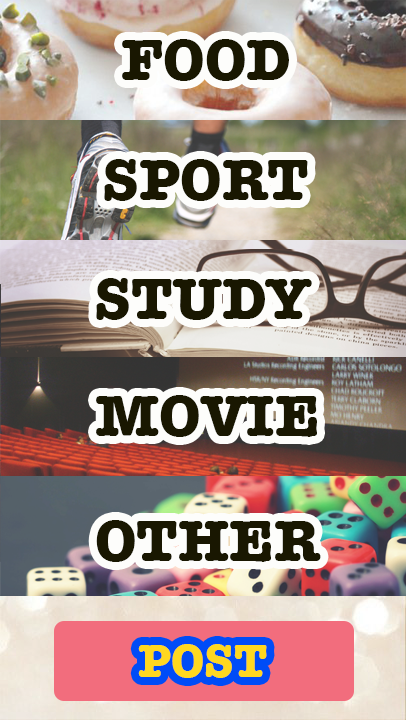
<style>
.page{position:relative;width:406px;height:720px}
.page>*{position:absolute;margin:0}
.t1{font:60px "AmericanTypewriter-Bold";color:#191701}
.t2{font:48px "AmericanTypewriter-Bold";color:#ffd820}
</style>
<div class="page">
<p class="t1" style="left:122px;top:39px;width:167px;height:42px">FOOD</p>
<p class="t1" style="left:104px;top:159px;width:204px;height:42px">SPORT</p>
<p class="t1" style="left:96px;top:278px;width:216px;height:42px">STUDY</p>
<p class="t1" style="left:96px;top:395px;width:221px;height:42px">MOVIE</p>
<p class="t1" style="left:96px;top:520px;width:225px;height:42px">OTHER</p>
<p class="t2" style="left:138px;top:644px;width:129px;height:34px">POST</p>
</div>
